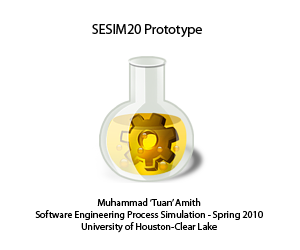
<style>
.page{position:relative;width:300px;height:250px;background:#ffffff}
.page>*{position:absolute;margin:0}
.t1{font:14px "MyriadPro-Regular";color:#000000}
.t2{font:10px "MyriadPro-Regular";color:#000000}
</style>
<div class="page">
<p class="t1" style="left:92px;top:24px;width:110px;height:13px">SESIM20 Prototype</p>
<p class="t2" style="left:35px;top:198px;width:228px;height:35px;text-align:center">Muhammad ‘Tuan’ Amith<br>Software Engineering Process Simulation - Spring 2010<br>University of Houston-Clear Lake</p>
</div>
